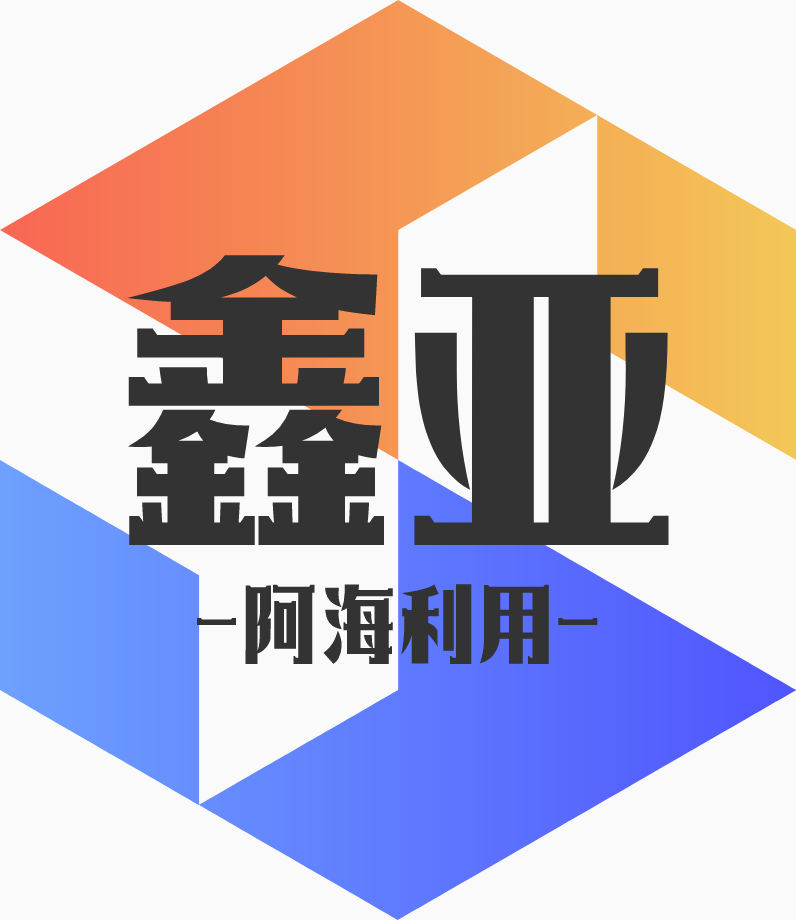
<style>
.page{position:relative;width:796px;height:920px;background:#fafafa}
.page>*{position:absolute;margin:0}
.t1{font:366.1px "139-SSDingSongTi";color:#333333}
.t2{font:100px "139-SSDingSongTi";color:#333333}
</style>
<div class="page">
<p class="t1" style="left:127px;top:255px;width:542px;height:290px">鑫亚</p>
<p class="t2" style="left:197px;top:584px;width:401px;height:80px">-阿海利用-</p>
</div>
